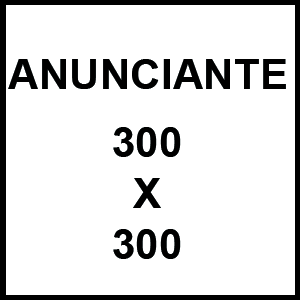
<style>
.page{position:relative;width:300px;height:300px;background:#ffffff}
.page>*{position:absolute;margin:0}
.t1{font:42.3px "Arial-BoldMT";color:#000000}
</style>
<div class="page">
<p class="t1" style="left:8px;top:59px;width:278px;height:30px">ANUNCIANTE</p>
<p class="t1" style="left:113px;top:127px;width:68px;height:132px;text-align:center">300<br>X<br>300</p>
</div>
